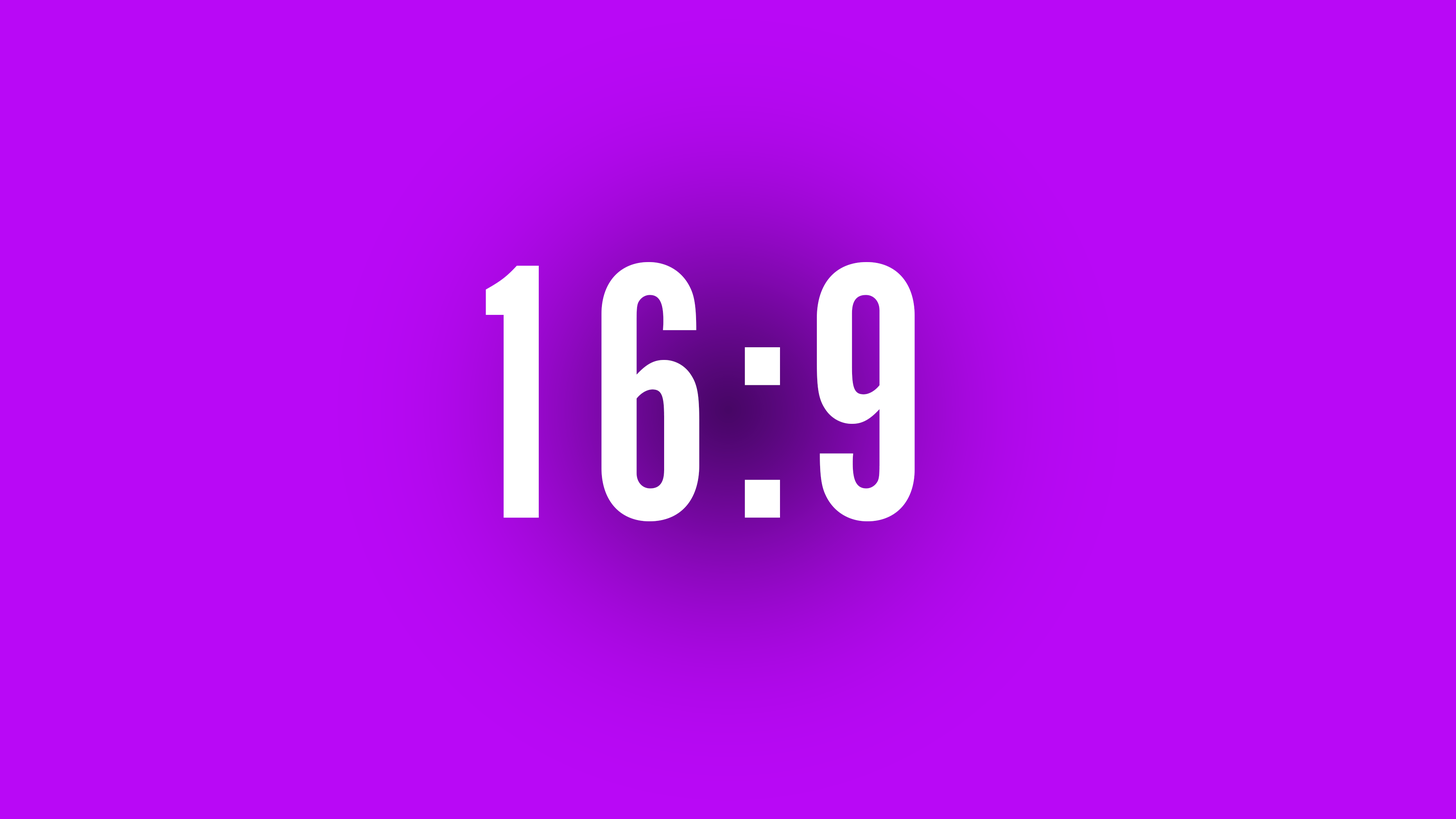
<style>
.page{position:relative;width:1456px;height:819px;background:#b908f6}
.page>*{position:absolute;margin:0}
.t1{font:377.5px "AlternateGotNo1D";letter-spacing:0.01em;color:#ffffff}
</style>
<div class="page">
<p class="t1" style="left:486px;top:262px;width:429px;height:259px">16:9</p>
</div>
